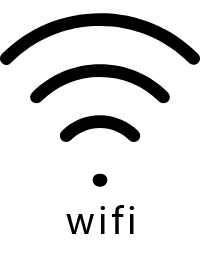
<style>
.page{position:relative;width:200px;height:255px;background:#ffffff}
.page>*{position:absolute;margin:0}
.t1{font:36px "MicrosoftYaHei";letter-spacing:0.1em;color:#000000}
</style>
<div class="page">
<p class="t1" style="left:66px;top:205px;width:68px;height:29px">wifi</p>
</div>
